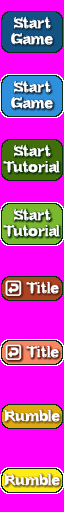
<style>
.page{position:relative;width:64px;height:512px;background:#ff00ff}
.page>*{position:absolute;margin:0}
.t1{font:15px/16px "Bundy-Regular";letter-spacing:-0.01em;color:#ffffff;font-weight:bold}
.t2{font:15px "Bundy-Regular";letter-spacing:-0.01em;color:#ffffff;font-weight:bold}
.t3{font:14px "SegoeUIEmoji";letter-spacing:-0.01em;color:#ffffff;font-weight:bold}
</style>
<div class="page">
<p class="t1" style="left:11px;top:16px;width:42px;height:29px;text-align:center">Start<br>Game</p>
<p class="t1" style="left:11px;top:80px;width:42px;height:29px;text-align:center">Start<br>Game</p>
<p class="t1" style="left:3px;top:144px;width:57px;height:29px;text-align:center">Start<br>Tutorial</p>
<p class="t1" style="left:3px;top:208px;width:57px;height:29px;text-align:center">Start<br>Tutorial</p>
<p class="t2" style="left:5px;top:280px;width:54px;height:16px"><span class="t3">↩️ </span>Title</p>
<p class="t2" style="left:5px;top:344px;width:54px;height:16px"><span class="t3">↩️ </span>Title</p>
<p class="t2" style="left:4px;top:409px;width:56px;height:13px">Rumble</p>
<p class="t2" style="left:4px;top:473px;width:56px;height:13px">Rumble</p>
</div>
